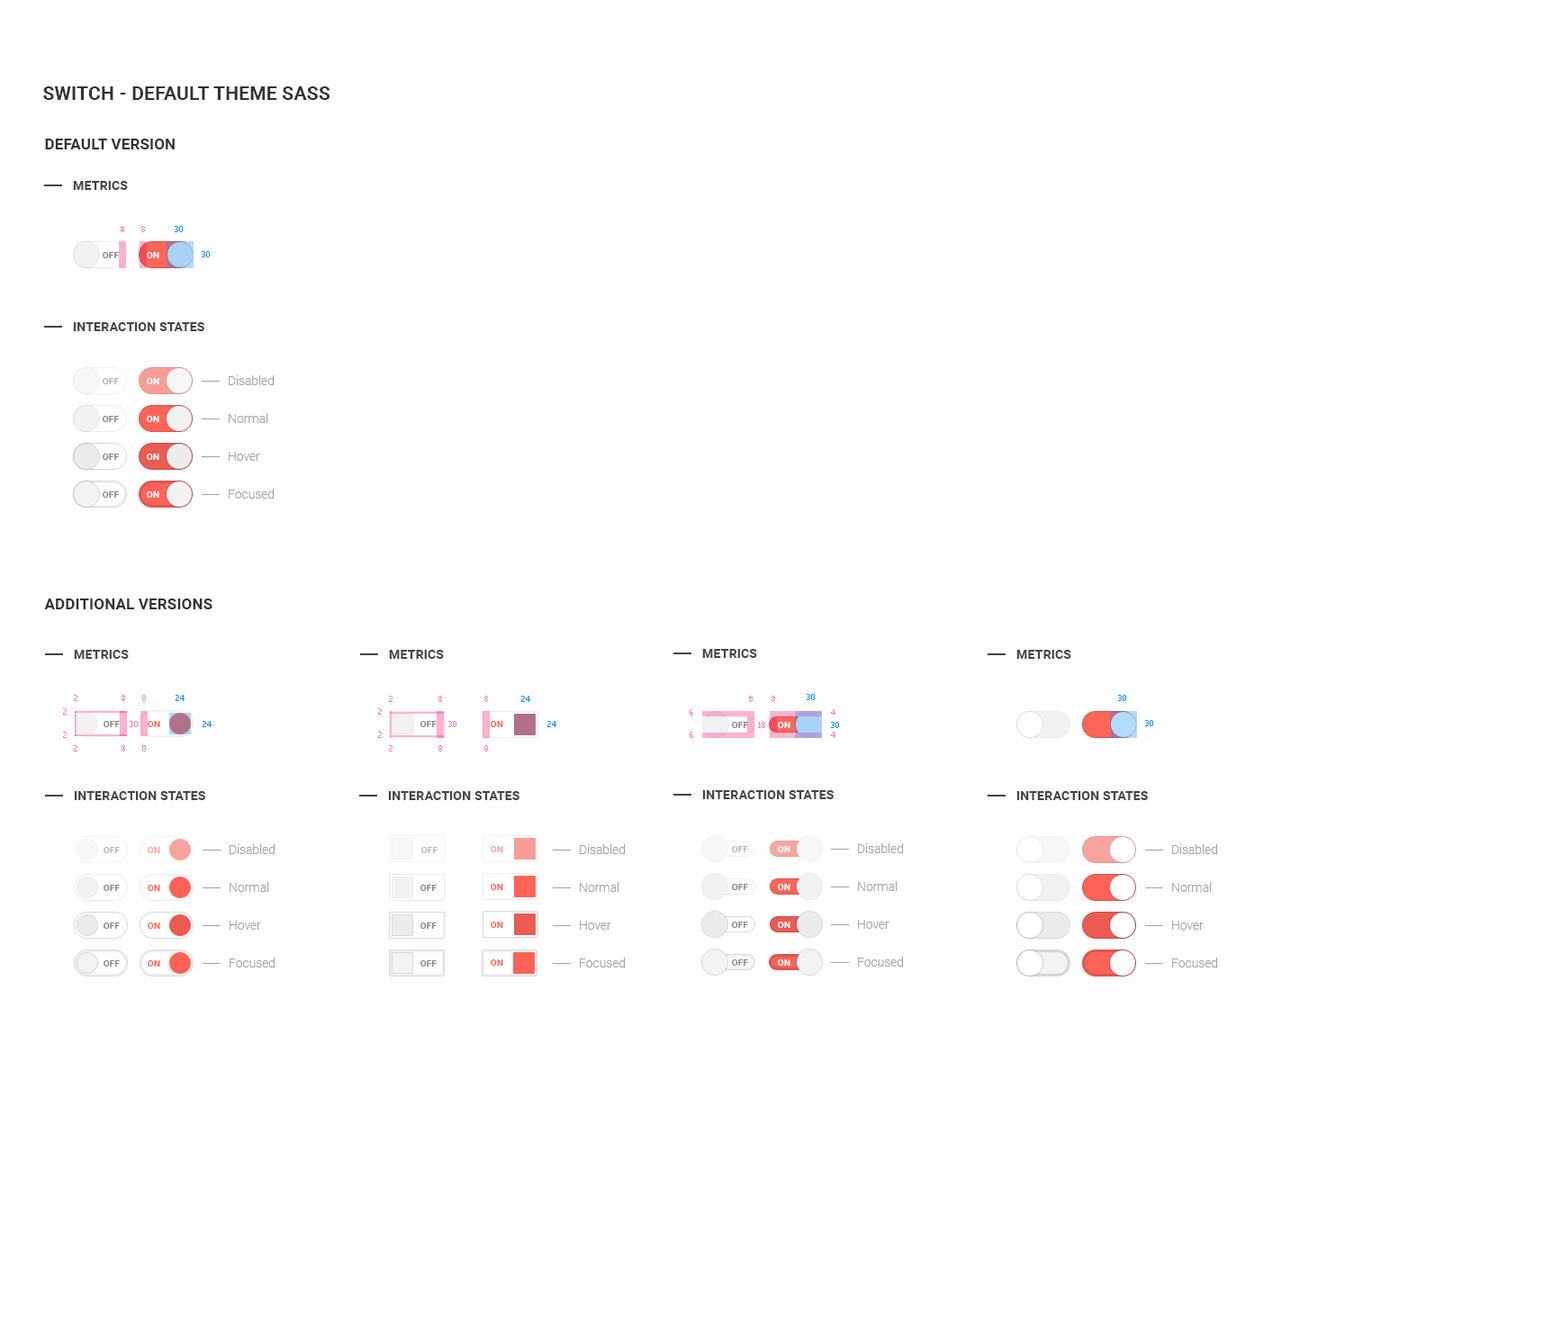
<style>
.page{position:relative;width:1561px;height:1332px;background:#ffffff}
.page>*{position:absolute;margin:0}
.t1{font:18.9px "Roboto-Bold";letter-spacing:0.01em;color:#313131;text-transform:uppercase}
.t2{font:15.3px "Roboto-Bold";letter-spacing:0.01em;color:#313131;text-transform:uppercase}
.t3{font:12.6px "Roboto-Bold";letter-spacing:0.01em;color:#454545;text-transform:uppercase}
.t4{font:8.1px "Tahoma";color:#ff7cae}
.t5{font:8.1px "Tahoma";color:#008aff}
.t6{font:9px "Roboto-Bold";letter-spacing:0.01em;color:#858585;text-transform:uppercase}
.t7{font:9px "Roboto-Bold";letter-spacing:0.01em;color:#ffffff;text-transform:uppercase}
.t8{font:12.6px/37.8px "Roboto-Light";color:#a1a1a1}
.t9{font:9px "Roboto-Bold";letter-spacing:0.01em;color:#b0b0b0;text-transform:uppercase}
.t10{font:9px "Roboto-Bold";letter-spacing:0.01em;color:#ff6358;text-transform:uppercase}
.t11{font:9px "Roboto-Bold";letter-spacing:0.01em;color:#f89d96;text-transform:uppercase}
.t12{font:9px "Roboto-Bold";letter-spacing:0.01em;color:#b6b6b6;text-transform:uppercase}
.t13{font:9px "Roboto-Bold";letter-spacing:0.01em;color:#f8a49e;text-transform:uppercase}
</style>
<div class="page">
<p class="t1" style="left:43px;top:86px;width:287px;height:14px">switch - default theme sass</p>
<p class="t2" style="left:45px;top:139px;width:130px;height:10px">default version</p>
<p class="t3" style="left:73px;top:181px;width:55px;height:9px">Metrics</p>
<p class="t4" style="left:121px;top:226px;width:3px;height:6px">8</p>
<p class="t4" style="left:141px;top:226px;width:4px;height:6px">8</p>
<p class="t5" style="left:175px;top:226px;width:8px;height:6px">30</p>
<p class="t6" style="left:103px;top:252px;width:16px;height:6px">off</p>
<p class="t7" style="left:147px;top:252px;width:12px;height:6px">on</p>
<p class="t5" style="left:202px;top:251px;width:8px;height:6px">30</p>
<p class="t3" style="left:73px;top:322px;width:131px;height:9px">Interaction states</p>
<p class="t8" style="left:229px;top:375px;width:45px;height:124px">Disabled<br>Normal<br>Hover<br>Focused</p>
<p class="t9" style="left:103px;top:378px;width:16px;height:6px">off</p>
<p class="t7" style="left:147px;top:378px;width:12px;height:6px">on</p>
<p class="t6" style="left:103px;top:416px;width:16px;height:6px">off</p>
<p class="t7" style="left:147px;top:416px;width:12px;height:6px">on</p>
<p class="t6" style="left:103px;top:454px;width:16px;height:6px">off</p>
<p class="t7" style="left:147px;top:454px;width:12px;height:6px">on</p>
<p class="t6" style="left:103px;top:491px;width:16px;height:7px">off</p>
<p class="t7" style="left:147px;top:491px;width:12px;height:7px">on</p>
<p class="t2" style="left:44px;top:598px;width:168px;height:11px">additional versions</p>
<p class="t3" style="left:74px;top:650px;width:55px;height:9px">Metrics</p>
<p class="t3" style="left:389px;top:650px;width:55px;height:9px">Metrics</p>
<p class="t3" style="left:702px;top:649px;width:55px;height:9px">Metrics</p>
<p class="t3" style="left:1016px;top:650px;width:55px;height:9px">Metrics</p>
<p class="t4" style="left:74px;top:695px;width:3px;height:6px">2</p>
<p class="t4" style="left:122px;top:695px;width:3px;height:6px">8</p>
<p class="t4" style="left:142px;top:695px;width:4px;height:6px">8</p>
<p class="t5" style="left:176px;top:695px;width:8px;height:6px">24</p>
<p class="t4" style="left:389px;top:696px;width:3px;height:6px">2</p>
<p class="t4" style="left:438px;top:696px;width:4px;height:6px">8</p>
<p class="t4" style="left:484px;top:696px;width:4px;height:6px">8</p>
<p class="t5" style="left:521px;top:696px;width:9px;height:6px">24</p>
<p class="t4" style="left:749px;top:696px;width:3px;height:6px">8</p>
<p class="t4" style="left:771px;top:696px;width:4px;height:6px">8</p>
<p class="t5" style="left:806px;top:694px;width:8px;height:6px">30</p>
<p class="t5" style="left:1118px;top:695px;width:8px;height:6px">30</p>
<p class="t4" style="left:63px;top:708px;width:4px;height:7px">2</p>
<p class="t4" style="left:378px;top:708px;width:4px;height:7px">2</p>
<p class="t4" style="left:689px;top:709px;width:4px;height:7px">6</p>
<p class="t4" style="left:831px;top:709px;width:4px;height:7px">4</p>
<p class="t6" style="left:104px;top:721px;width:16px;height:6px">off</p>
<p class="t4" style="left:130px;top:721px;width:8px;height:6px">30</p>
<p class="t10" style="left:148px;top:721px;width:12px;height:6px">on</p>
<p class="t5" style="left:202px;top:721px;width:10px;height:6px">24</p>
<p class="t6" style="left:420px;top:721px;width:16px;height:6px">off</p>
<p class="t4" style="left:448px;top:721px;width:8px;height:6px">30</p>
<p class="t10" style="left:490px;top:721px;width:13px;height:6px">on</p>
<p class="t5" style="left:547px;top:721px;width:9px;height:6px">24</p>
<p class="t6" style="left:732px;top:722px;width:16px;height:6px">off</p>
<p class="t4" style="left:758px;top:722px;width:7px;height:6px">18</p>
<p class="t7" style="left:778px;top:722px;width:12px;height:6px">on</p>
<p class="t5" style="left:831px;top:722px;width:8px;height:6px">30</p>
<p class="t5" style="left:1145px;top:720px;width:8px;height:6px">30</p>
<p class="t4" style="left:63px;top:732px;width:4px;height:6px">2</p>
<p class="t4" style="left:378px;top:732px;width:4px;height:6px">2</p>
<p class="t4" style="left:689px;top:732px;width:4px;height:6px">6</p>
<p class="t4" style="left:831px;top:732px;width:4px;height:6px">4</p>
<p class="t4" style="left:74px;top:745px;width:3px;height:7px">2</p>
<p class="t4" style="left:122px;top:745px;width:3px;height:7px">8</p>
<p class="t4" style="left:142px;top:745px;width:4px;height:7px">8</p>
<p class="t4" style="left:389px;top:745px;width:3px;height:7px">2</p>
<p class="t4" style="left:438px;top:745px;width:4px;height:7px">8</p>
<p class="t4" style="left:484px;top:745px;width:4px;height:7px">8</p>
<p class="t3" style="left:74px;top:791px;width:131px;height:9px">Interaction states</p>
<p class="t3" style="left:388px;top:791px;width:131px;height:9px">Interaction states</p>
<p class="t3" style="left:702px;top:790px;width:131px;height:9px">Interaction states</p>
<p class="t3" style="left:1016px;top:791px;width:132px;height:9px">Interaction states</p>
<p class="t8" style="left:230px;top:844px;width:45px;height:124px">Disabled<br>Normal<br>Hover<br>Focused</p>
<p class="t11" style="left:490px;top:846px;width:13px;height:6px">on</p>
<p class="t8" style="left:580px;top:844px;width:46px;height:124px">Disabled<br>Normal<br>Hover<br>Focused</p>
<p class="t12" style="left:732px;top:846px;width:16px;height:6px">off</p>
<p class="t7" style="left:778px;top:846px;width:12px;height:6px">on</p>
<p class="t8" style="left:858px;top:843px;width:46px;height:124px">Disabled<br>Normal<br>Hover<br>Focused</p>
<p class="t8" style="left:1172px;top:844px;width:46px;height:124px">Disabled<br>Normal<br>Hover<br>Focused</p>
<p class="t12" style="left:104px;top:847px;width:16px;height:6px">off</p>
<p class="t13" style="left:148px;top:847px;width:12px;height:6px">on</p>
<p class="t12" style="left:421px;top:847px;width:16px;height:6px">off</p>
<p class="t6" style="left:104px;top:885px;width:16px;height:6px">off</p>
<p class="t10" style="left:148px;top:885px;width:12px;height:6px">on</p>
<p class="t6" style="left:420px;top:885px;width:16px;height:6px">off</p>
<p class="t10" style="left:490px;top:884px;width:13px;height:6px">on</p>
<p class="t6" style="left:732px;top:884px;width:16px;height:6px">off</p>
<p class="t7" style="left:778px;top:884px;width:12px;height:6px">on</p>
<p class="t6" style="left:104px;top:922px;width:16px;height:7px">off</p>
<p class="t10" style="left:148px;top:922px;width:12px;height:7px">on</p>
<p class="t6" style="left:420px;top:922px;width:16px;height:7px">off</p>
<p class="t10" style="left:490px;top:922px;width:13px;height:6px">on</p>
<p class="t6" style="left:732px;top:922px;width:16px;height:6px">off</p>
<p class="t7" style="left:778px;top:922px;width:12px;height:6px">on</p>
<p class="t6" style="left:104px;top:960px;width:16px;height:7px">off</p>
<p class="t10" style="left:148px;top:960px;width:12px;height:7px">on</p>
<p class="t6" style="left:420px;top:960px;width:16px;height:7px">off</p>
<p class="t10" style="left:490px;top:959px;width:13px;height:7px">on</p>
<p class="t6" style="left:732px;top:959px;width:16px;height:7px">off</p>
<p class="t7" style="left:778px;top:959px;width:12px;height:7px">on</p>
</div>
